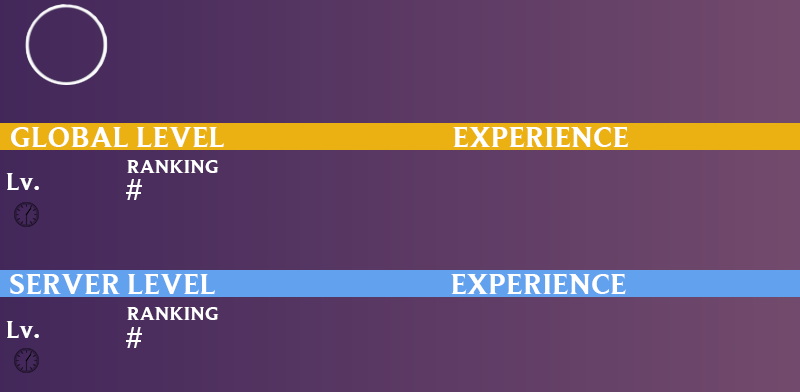
<style>
.page{position:relative;width:800px;height:392px}
.page>*{position:absolute;margin:0}
.t1{font:30px "BeaufortforLOL-Bold";letter-spacing:0.01em;color:#ffffff}
.t2{font:20px "BeaufortforLOL-Bold";letter-spacing:0.01em;color:#ffffff}
.t3{font:25px "BeaufortforLOL-Bold";letter-spacing:0.01em;color:#ffffff}
.t4{font:31px "BeaufortforLOL-Bold";letter-spacing:0.01em;color:#ffffff}
</style>
<div class="page">
<p class="t1" style="left:11px;top:127px;width:618px;height:20px">GLOBAL LEVEL                                  EXPERIENCE</p>
<p class="t2" style="left:127px;top:160px;width:92px;height:13px">RANKING</p>
<p class="t3" style="left:6px;top:173px;width:33px;height:17px">Lv.</p>
<p class="t4" style="left:126px;top:179px;width:16px;height:21px">#</p>
<p class="t1" style="left:10px;top:274px;width:616px;height:20px">SERVER LEVEL                                   EXPERIENCE</p>
<p class="t2" style="left:127px;top:307px;width:92px;height:13px">RANKING</p>
<p class="t3" style="left:6px;top:321px;width:33px;height:17px">Lv.</p>
<p class="t4" style="left:126px;top:327px;width:16px;height:21px">#</p>
</div>
